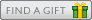
<style>
.page{position:relative;width:92px;height:20px;background:#e9eaeb}
.page>*{position:absolute;margin:0}
.t1{font:10px "GillSans";letter-spacing:0.075em;color:#7f7f7f}
</style>
<div class="page">
<p class="t1" style="left:6px;top:7px;width:60px;height:7px">FINDAGIFT</p>
</div>
